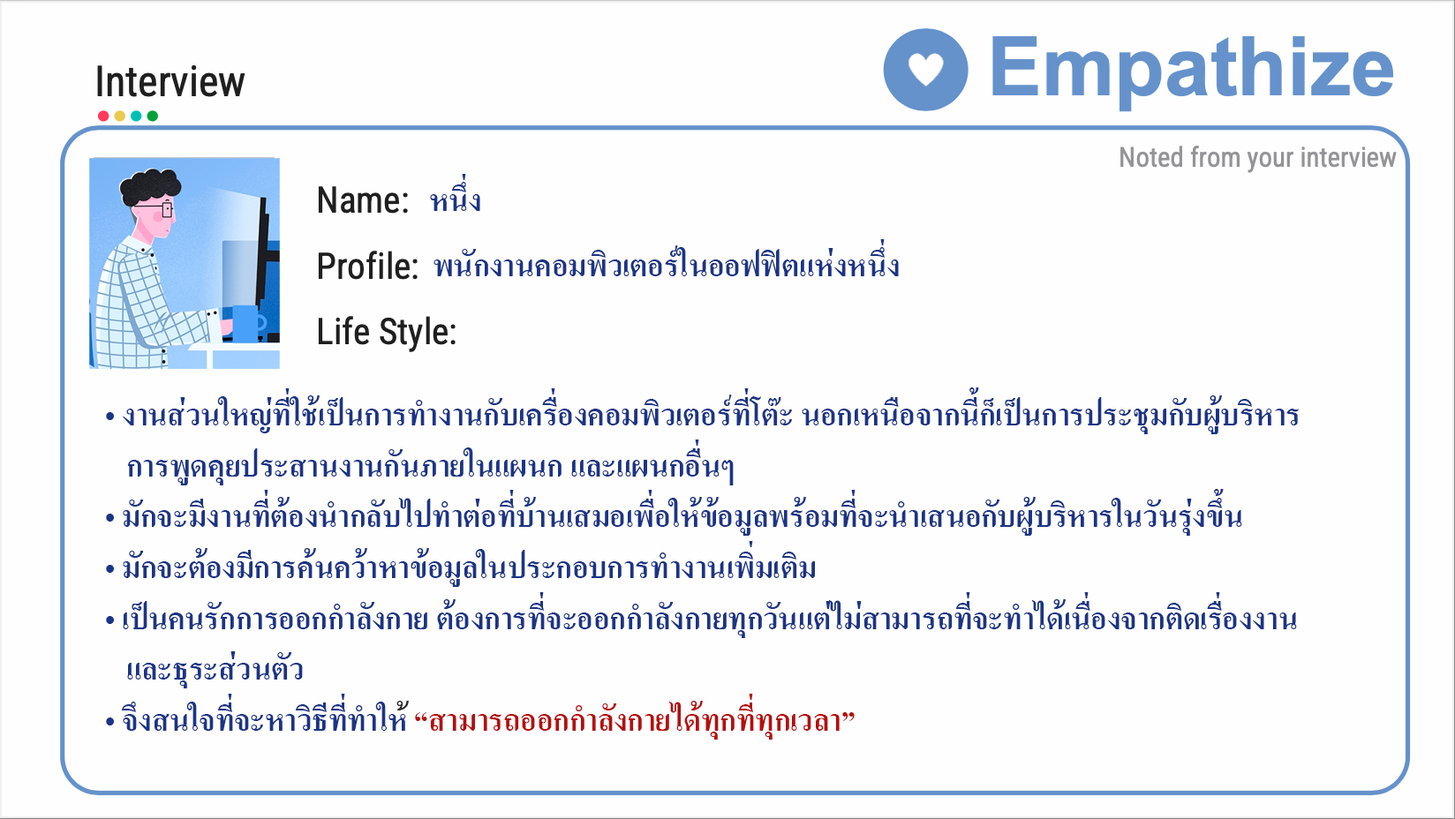
<style>
.page{position:relative;width:1455px;height:819px;background:#fefefe}
.page>*{position:absolute;margin:0}
.t1{font:42.4px "AngsanaUPC-Bold";color:#1b3485}
.t2{font:42.4px "AngsanaUPC-Bold";color:#2d2c2c}
.t3{font:42.4px "AngsanaUPC-Bold";color:#b50f0f}
</style>
<div class="page">
<p class="t1" style="left:430px;top:174px;width:50px;height:37px">หนึ่ง</p>
<p class="t1" style="left:434px;top:239px;width:465px;height:37px">พนักงานคอมพิวเตอร์ในออฟฟิตแห่งหนึ่ง</p>
<p class="t1" style="left:106px;top:388px;width:1193px;height:352px">• งานส่วนใหญ่ที่ใช้เป็นการทำงานกับเครื่องคอมพิวเตอร์ที่โต๊ะ นอกเหนือจากนี้ก็เป็นการประชุมกับผู้บริหาร <br>   การพูดคุยประสานงานกันภายในแผนก และแผนกอื่นๆ<br>• มักจะมีงานที่ต้องนำกลับไปทำต่อที่บ้านเสมอเพื่อให้ข้อมูลพร้อมที่จะนำเสนอกับผู้บริหารในวันรุ่งขึ้น<br>• มักจะต้องมีการค้นคว้าหาข้อมูลในประกอบการทำงานเพิ่มเติม<br>• เป็นคนรักการออกกำลังกาย ต้องการที่จะออกกำลังกายทุกวันแต่ไม่สามารถที่จะทำได้เนื่องจากติดเรื่องงาน <br>   และธุระส่วนตัว<br>• จึงสนใจที่จะหาวิธีที่ทำให<span class="t2">้ </span><span class="t3">“สามารถออกกำลังกายได้ทุกที่ทุกเวลา”</span></p>
</div>
